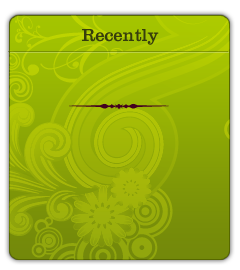
<style>
.page{position:relative;width:240px;height:270px}
.page>*{position:absolute;margin:0}
.t1{font:18px "ClarendonLT";color:#363e0c}
.t2{font:100px "WoodtypeOrnaments-One";color:#43001f}
</style>
<div class="page">
<p class="t1" style="left:82px;top:29px;width:77px;height:16px">Recently</p>
<p class="t2" style="left:69px;top:103px;width:100px;height:6px">r</p>
</div>
